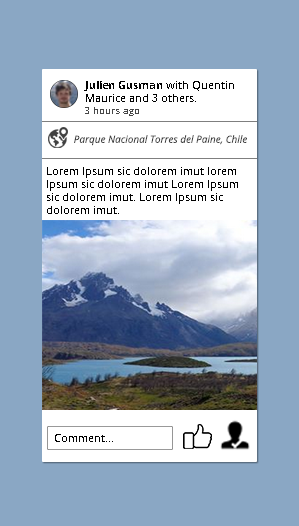
<style>
.page{position:relative;width:299px;height:526px;background:#8aa7c4}
.page>*{position:absolute;margin:0}
.t1{font:11px/13px "OpenSans";color:#000000}
.t2{font:11px/13px "OpenSans-Bold";color:#000000}
.t3{font:10px "OpenSans";color:#474747}
.t4{font:10px "OpenSans-Italic";color:#404040}
.t5{font:11px "OpenSans";color:#000000}
</style>
<div class="page">
<p class="t1" style="left:84px;top:81px;width:150px;height:21px"><span class="t2">Julien Gusman</span> with Quentin <br>Maurice and 3 others.</p>
<p class="t3" style="left:85px;top:107px;width:54px;height:9px">3 hours ago</p>
<p class="t4" style="left:74px;top:135px;width:173px;height:11px">Parque Nacional Torres del Paine, Chile</p>
<p class="t5" style="left:47px;top:167px;width:191px;height:47px">Lorem Ipsum sic dolorem imut lorem Ipsum sic dolorem imut Lorem Ipsum sic dolorem imut. Lorem Ipsum sic dolorem imut.</p>
<p class="t5" style="left:55px;top:434px;width:58px;height:8px">Comment...</p>
</div>
